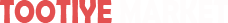
<style>
.page{position:relative;width:228px;height:23px;background:#ffffff}
.page>*{position:absolute;margin:0}
.t1{font:34px "BerlinSansFBDemi-Bold";color:#e35050;scale:0.82 1}
.t2{font:34px "BerlinSansFBDemi-Bold";color:#fefcfc;scale:0.82 1}
</style>
<div class="page">
<p class="t1" style="left:0px;top:0px;width:228px;height:24px">TOOTIYE<span class="t2"> MARKET</span></p>
</div>
